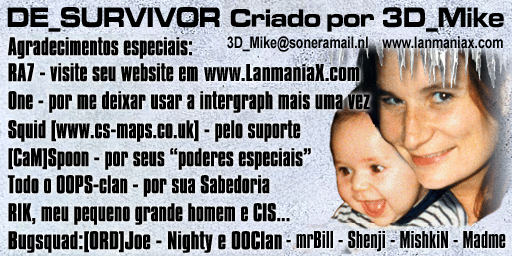
<style>
.page{position:relative;width:512px;height:256px}
.page>*{position:absolute;margin:0}
.t1{font:26px "MicrogrammaD-BoldExte";color:#000000;scale:0.89 1}
.t2{font:22px "Compacta";color:#000000;scale:1.1 1}
.t3{font:22px "Compacta";color:#000000;scale:1.17 1}
</style>
<div class="page">
<p class="t1" style="left:230px;top:9px;width:144px;height:23px">Criado por</p>
<p class="t2" style="left:8px;top:37px;width:184px;height:22px">Agradecimentos especiais:</p>
<p class="t2" style="left:8px;top:63px;width:190px;height:19px">RA7 - visite seu website em</p>
<p class="t2" style="left:8px;top:91px;width:362px;height:22px">One - por me deixar usar a intergraph mais uma vez</p>
<p class="t2" style="left:8px;top:120px;width:293px;height:22px">Squid [www.cs-maps.co.uk] - pelo suporte</p>
<p class="t2" style="left:8px;top:148px;width:303px;height:22px">[CaM]Spoon - por seus “poderes especiais”</p>
<p class="t2" style="left:7px;top:175px;width:263px;height:22px">Todo o OOPS-clan - por sua Sabedoria</p>
<p class="t2" style="left:8px;top:203px;width:282px;height:22px">RIK, meu pequeno grande homem e CIS...</p>
<p class="t3" style="left:8px;top:231px;width:274px;height:22px">Bugsquad:[ORD]Joe - Nighty e OOClan</p>
</div>
